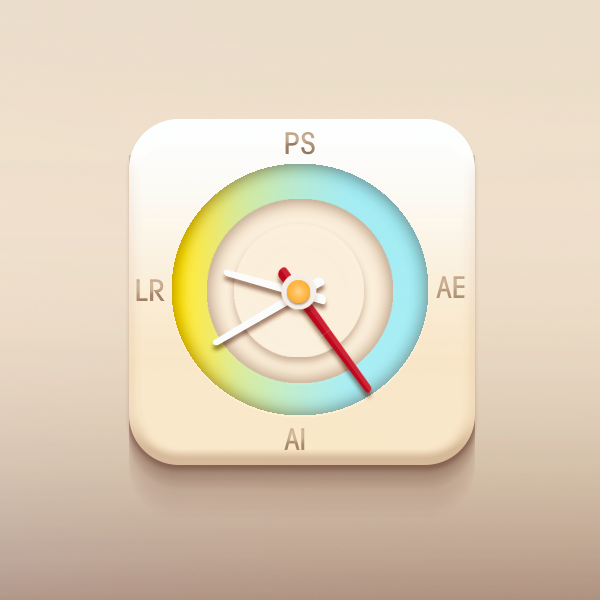
<style>
.page{position:relative;width:600px;height:600px}
.page>*{position:absolute;margin:0}
.t1{font:30px "E-F3"}
.t2{font:30px "E-F3";color:#bda387}
</style>
<div class="page">
<p class="t1" style="left:285px;top:132px;width:30px;height:23px">PS</p>
<p class="t1" style="left:136px;top:279px;width:29px;height:22px">LR</p>
<p class="t2" style="left:436px;top:276px;width:29px;height:22px">AE</p>
<p class="t1" style="left:284px;top:428px;width:21px;height:22px">AI</p>
</div>
